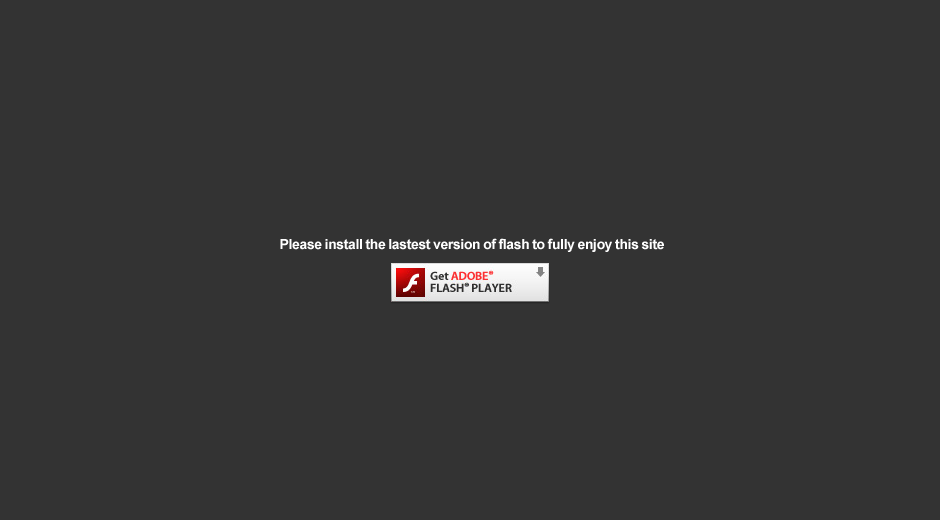
<style>
.page{position:relative;width:940px;height:520px;background:#333333}
.page>*{position:absolute;margin:0}
.t1{font:14px "Arial-BoldMT";letter-spacing:-0.025em;color:#fefefe}
</style>
<div class="page">
<p class="t1" style="left:280px;top:238px;width:384px;height:14px">Please install the lastest version of flash to fully enjoy this site</p>
</div>
